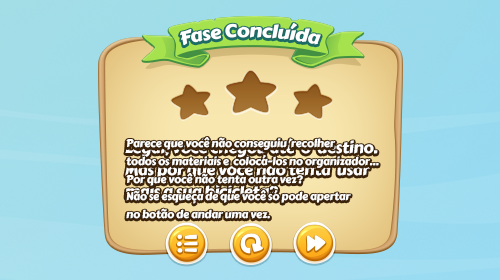
<style>
.page{position:relative;width:500px;height:280px}
.page>*{position:absolute;margin:0}
.t1{font:18.2px "CarterOne";letter-spacing:-0.02em;color:#ffffff;scale:1.05 1}
.t2{font:11px/17.8px "CarterOne";letter-spacing:-0.02em;color:#ffffff}
</style>
<div class="page">
<p class="t1" style="left:180px;top:22px;width:141px;height:24px">Fase Concluída</p>
<p class="t2" style="left:126px;top:137px;width:253px;height:82px">Parece que você não conseguiu  recolher <br>todos os materiais e  colocá-los no organizador… <br>Por que você não tenta outra vez?  <br>Não se esqueça de que você só pode apertar <br>no botão de andar uma vez.</p>
</div>
